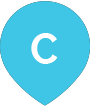
<style>
.page{position:relative;width:90px;height:106px;background:#3fc5e5}
.page>*{position:absolute;margin:0}
.t1{font:42px "Raleway-Bold";letter-spacing:0.037em;color:#ffffff}
</style>
<div class="page">
<p class="t1" style="left:31px;top:33px;width:27px;height:31px">C</p>
<p class="t1" style="left:31px;top:33px;width:27px;height:31px">C</p>
</div>
